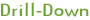
<style>
.page{position:relative;width:90px;height:20px;background:#ffffff}
.page>*{position:absolute;margin:0}
.t1{font:15.9px "ArchitecturePlain";color:#6ea337;scale:1.8 1}
</style>
<div class="page">
<p class="t1" style="left:1px;top:2px;width:88px;height:15px">Drill-Down</p>
</div>
